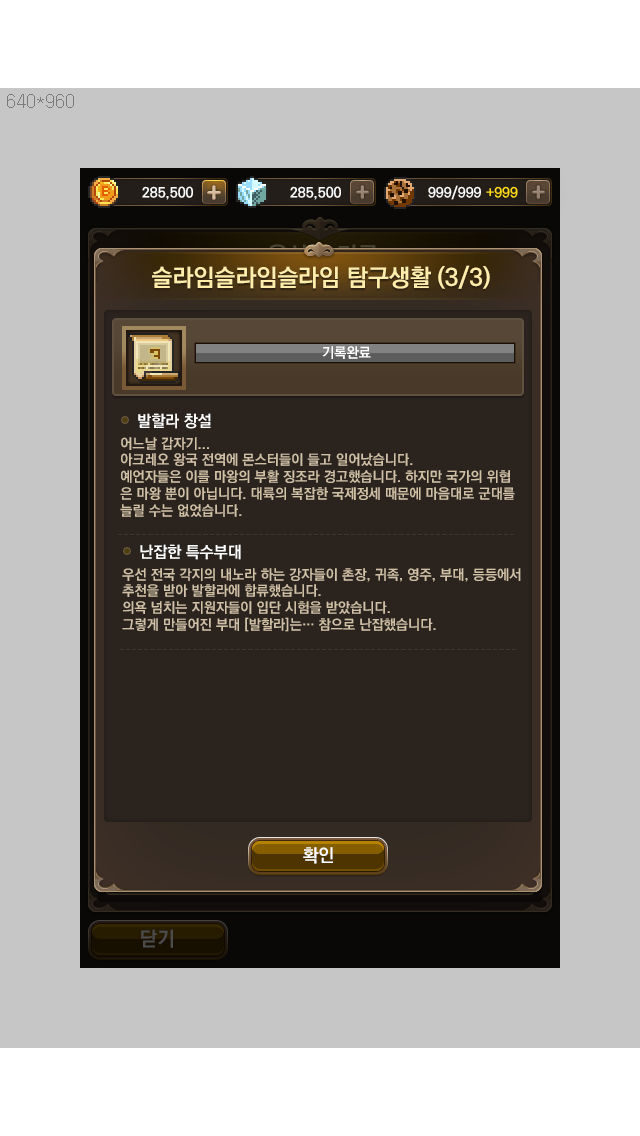
<style>
.page{position:relative;width:640px;height:1136px;background:#c6c6c6}
.page>*{position:absolute;margin:0}
.t1{font:24px "KoPubDotumBold";color:#ffedab}
.t2{font:14px "KoPubDotumBold";color:#ffffff}
.t3{font:16px "KoPubDotumBold";color:#ffffff}
.t4{font:14px "KoPubDotumBold";color:#d0c0a6}
.t5{font:18px "KoPubDotumBold";color:#ffffff}
</style>
<div class="page">
<p class="t1" style="left:152px;top:265px;width:338px;height:24px">슬라임슬라임슬라임 탐구생활 (3/3)</p>
<p class="t2" style="left:322px;top:346px;width:49px;height:13px">기록완료</p>
<p class="t3" style="left:138px;top:413px;width:73px;height:16px">발할라 창설</p>
<p class="t4" style="left:120px;top:437px;width:395px;height:80px">어느날 갑자기... <br>아크레오 왕국 전역에 몬스터들이 들고 일어났습니다. <br>예언자들은 이를 마왕의 부활 징조라 경고했습니다. 하지만 국가의 위협<br>은 마왕 뿐이 아닙니다. 대륙의 복잡한 국제정세 때문에 마음대로 군대를 <br>늘릴 수는 없었습니다.</p>
<p class="t3" style="left:140px;top:544px;width:101px;height:16px">난잡한 특수부대</p>
<p class="t4" style="left:122px;top:568px;width:399px;height:64px">우선 전국 각지의 내노라 하는 강자들이 촌장, 귀족, 영주, 부대, 등등에서 <br>추천을 받아 발할라에 합류했습니다.<br>의욕 넘치는 지원자들이 입단 시험을 받았습니다.<br>그렇게 만들어진 부대 [발할라]는… 참으로 난잡했습니다.</p>
<p class="t5" style="left:303px;top:847px;width:30px;height:17px">확인</p>
</div>
